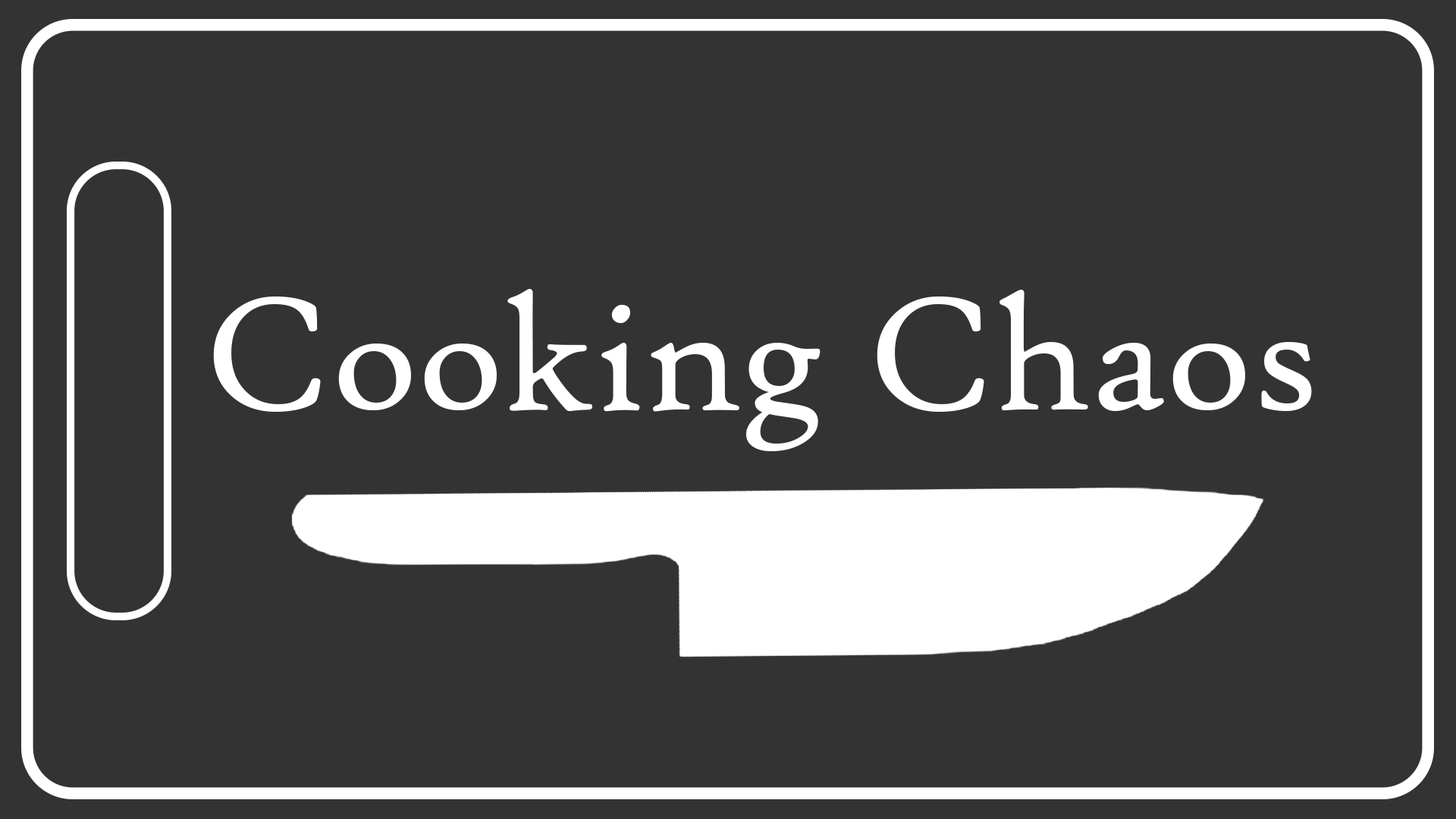
<style>
.page{position:relative;width:1456px;height:819px;background:#333333}
.page>*{position:absolute;margin:0}
.t1{font:172.1px "HighTowerText-Reg";color:#ffffff}
</style>
<div class="page">
<p class="t1" style="left:213px;top:289px;width:1099px;height:162px">Cooking Chaos</p>
</div>
